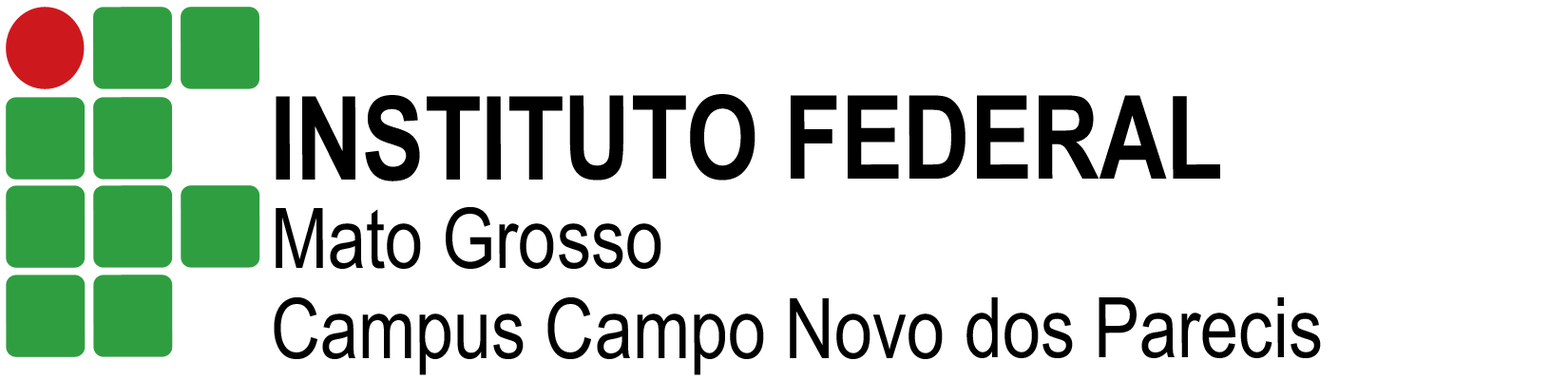
<style>
.page{position:relative;width:1568px;height:380px;background:#ffffff}
.page>*{position:absolute;margin:0}
.t1{font:115.9px "ArialNarrow-Bold";color:#000000}
.t2{font:83.6px "ArialNarrow";color:#000000}
</style>
<div class="page">
<p class="t1" style="left:276px;top:94px;width:944px;height:88px">INSTITUTO FEDERAL</p>
<p class="t2" style="left:276px;top:207px;width:385px;height:62px">Mato Grosso</p>
<p class="t2" style="left:274px;top:297px;width:1047px;height:78px">Campus Campo Novo dos Parecis</p>
</div>
